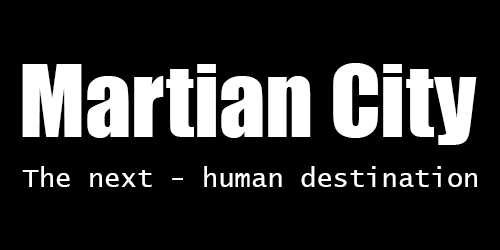
<style>
.page{position:relative;width:500px;height:250px;background:#000000}
.page>*{position:absolute;margin:0}
.t1{font:91.8px "Impact";color:#ffffff}
.t2{font:27.1px "LucidaConsole";color:#ffffff}
</style>
<div class="page">
<p class="t1" style="left:22px;top:63px;width:455px;height:82px">Martian City</p>
<p class="t2" style="left:22px;top:166px;width:455px;height:21px">The next - human destination</p>
</div>
